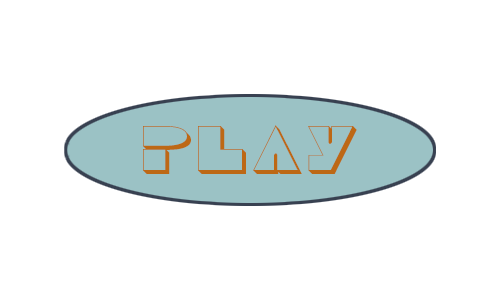
<style>
.page{position:relative;width:500px;height:300px;background:#ffffff}
.page>*{position:absolute;margin:0}
.t1{font:72px "DiscoDuck3D";color:#bd6815}
</style>
<div class="page">
<p class="t1" style="left:143px;top:125px;width:214px;height:49px">Play</p>
</div>
